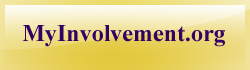
<style>
.page{position:relative;width:250px;height:70px}
.page>*{position:absolute;margin:0}
.t1{font:24px "TimesNewRomanPS-BoldMT";color:#330066}
</style>
<div class="page">
<p class="t1" style="left:22px;top:25px;width:203px;height:22px">MyInvolvement.org</p>
</div>
